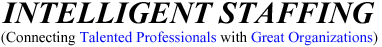
<style>
.page{position:relative;width:382px;height:47px;background:#ffffff}
.page>*{position:absolute;margin:0}
.t1{font:40px "Kokila-BoldItalic";color:#000000}
.t2{font:19.5px "Kokila";color:#0a0ff4}
.t3{font:19.5px "Kokila";color:#000000}
</style>
<div class="page">
<p class="t1" style="left:1px;top:2px;width:374px;height:22px">INTELLIGENT STAFFING</p>
<p class="t2" style="left:1px;top:31px;width:377px;height:15px"><span class="t3">(Connecting </span>Talented Professionals<span class="t3"> with </span>Great Organizations<span class="t3">)</span></p>
</div>
